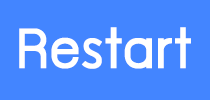
<style>
.page{position:relative;width:210px;height:100px;background:#4385ff}
.page>*{position:absolute;margin:0}
.t1{font:65px "supermarket";color:#ffffff;font-weight:bold}
</style>
<div class="page">
<p class="t1" style="left:19px;top:27px;width:172px;height:42px">Restart</p>
</div>
